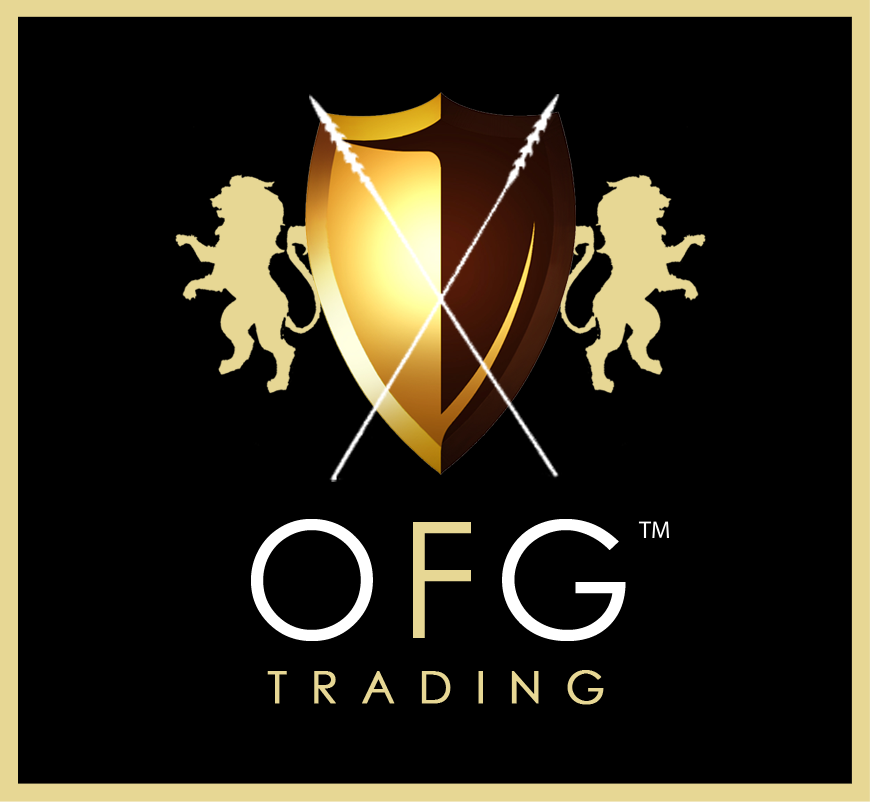
<style>
.page{position:relative;width:870px;height:802px;background:#000000}
.page>*{position:absolute;margin:0}
.t1{font:161.4px "CenturyGothic";letter-spacing:0.1em;color:#ffffff}
.t2{font:161.4px "CenturyGothic";letter-spacing:0.1em;color:#e7d794}
.t3{font:44.8px "CenturyGothic";letter-spacing:0.5em;color:#e7d794;font-weight:bold}
</style>
<div class="page">
<p class="t1" style="left:251px;top:519px;width:375px;height:122px">O<span class="t2">F</span>G</p>
<p class="t3" style="left:267px;top:670px;width:337px;height:35px">TRADING</p>
</div>
